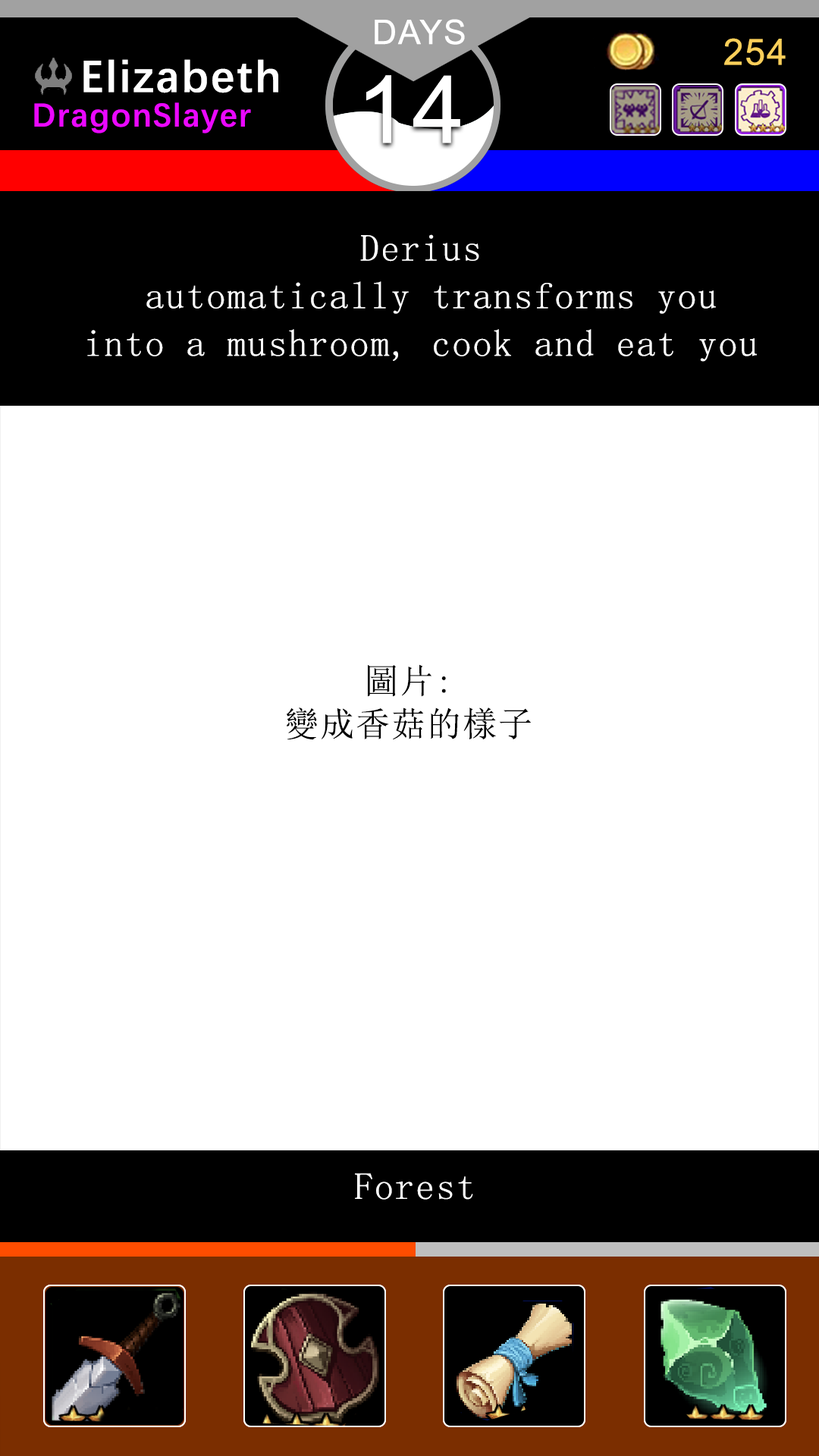
<style>
.page{position:relative;width:819px;height:1456px;background:#ffffff}
.page>*{position:absolute;margin:0}
.t1{font:37.9px/47.6px "SimSun";letter-spacing:0.04em;color:#ffffff}
.t2{font:34.3px/43.1px "SimSun";letter-spacing:0.04em;color:#000000}
.t3{font:37.9px "SimSun";letter-spacing:0.04em;color:#ffffff}
</style>
<div class="page">
<p class="t1" style="left:87px;top:234px;width:670px;height:128px;text-align:center">Derius<br> automatically transforms you<br> into a mushroom, cook and eat you</p>
<p class="t2" style="left:286px;top:664px;width:246px;height:76px;text-align:center">圖片:<br>變成香菇的樣子</p>
<p class="t3" style="left:355px;top:1173px;width:118px;height:27px">Forest</p>
</div>
